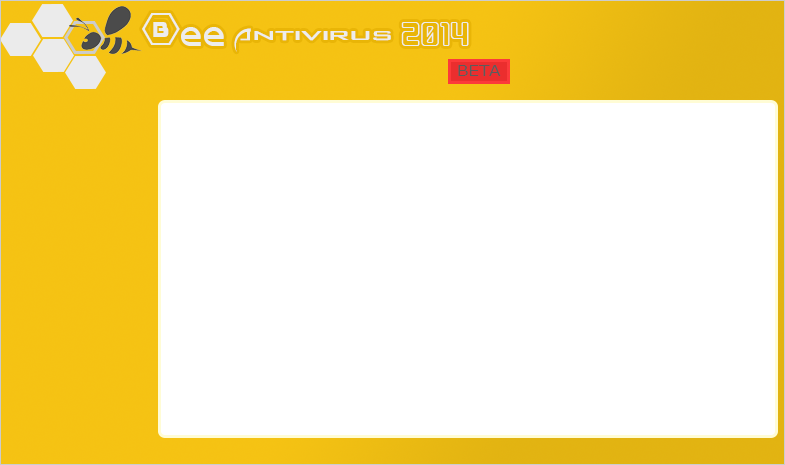
<style>
.page{position:relative;width:785px;height:465px;background:#ffffff}
.page>*{position:absolute;margin:0}
.t1{font:30px "Backslash";color:#ededed}
.t2{font:36px "D3-Honeycombism";color:#ededed}
.t3{font:30px "Spaz-1";color:#ededed}
.t4{font:30px "disc";color:#ededed}
.t5{font:15.2px "MeiryoUI";color:#5c5c5c;scale:1.14 1}
</style>
<div class="page">
<p class="t1" style="left:142px;top:13px;width:327px;height:39px"><span class="t2">B</span><span class="t3">ee </span>Antivirus <span class="t4">2014</span></p>
<p class="t5" style="left:458px;top:65px;width:43px;height:11px">BETA</p>
</div>
